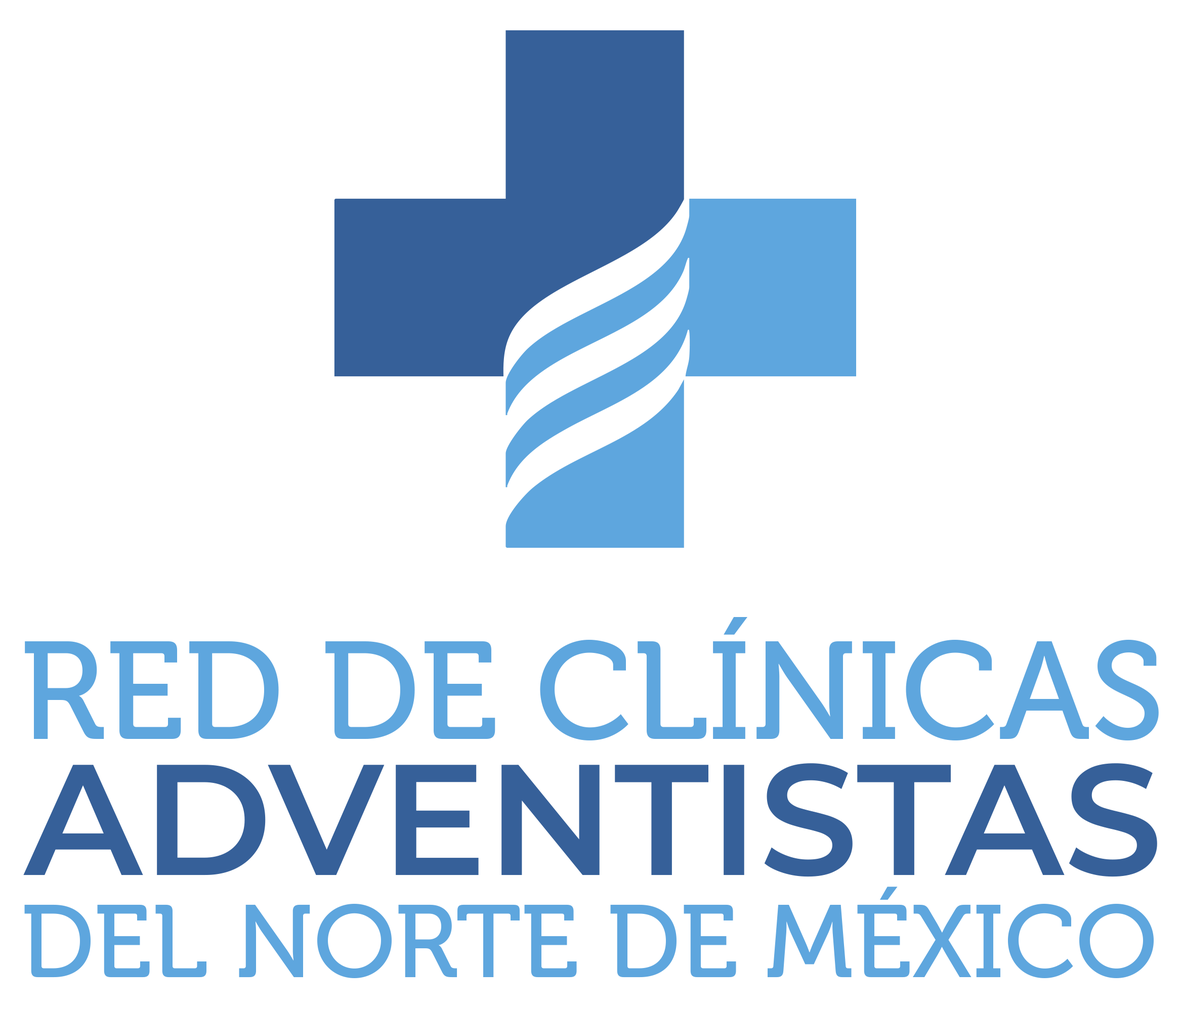
<style>
.page{position:relative;width:1181px;height:1010px;background:#ffffff}
.page>*{position:absolute;margin:0}
.t1{font:138.4px "Museo-500";color:#5ea6de;text-transform:uppercase}
.t2{font:157.3px "Montserrat-SemiBold";color:#366099;text-transform:uppercase}
.t3{font:102.4px "Museo-500";color:#5ea6de;text-transform:uppercase}
</style>
<div class="page">
<p class="t1" style="left:25px;top:617px;width:1133px;height:124px">red de Clínicas</p>
<p class="t2" style="left:23px;top:763px;width:1134px;height:114px">adventistas</p>
<p class="t3" style="left:24px;top:887px;width:1129px;height:91px">del norte de méxico</p>
</div>
